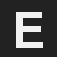
<style>
.page{position:relative;width:57px;height:57px;background:#222222}
.page>*{position:absolute;margin:0}
.t1{font:50px "Arial-BoldMT";letter-spacing:-0.025em;color:#f1f1f1;text-transform:uppercase}
</style>
<div class="page">
<p class="t1" style="left:16px;top:12px;width:27px;height:36px">E</p>
</div>
